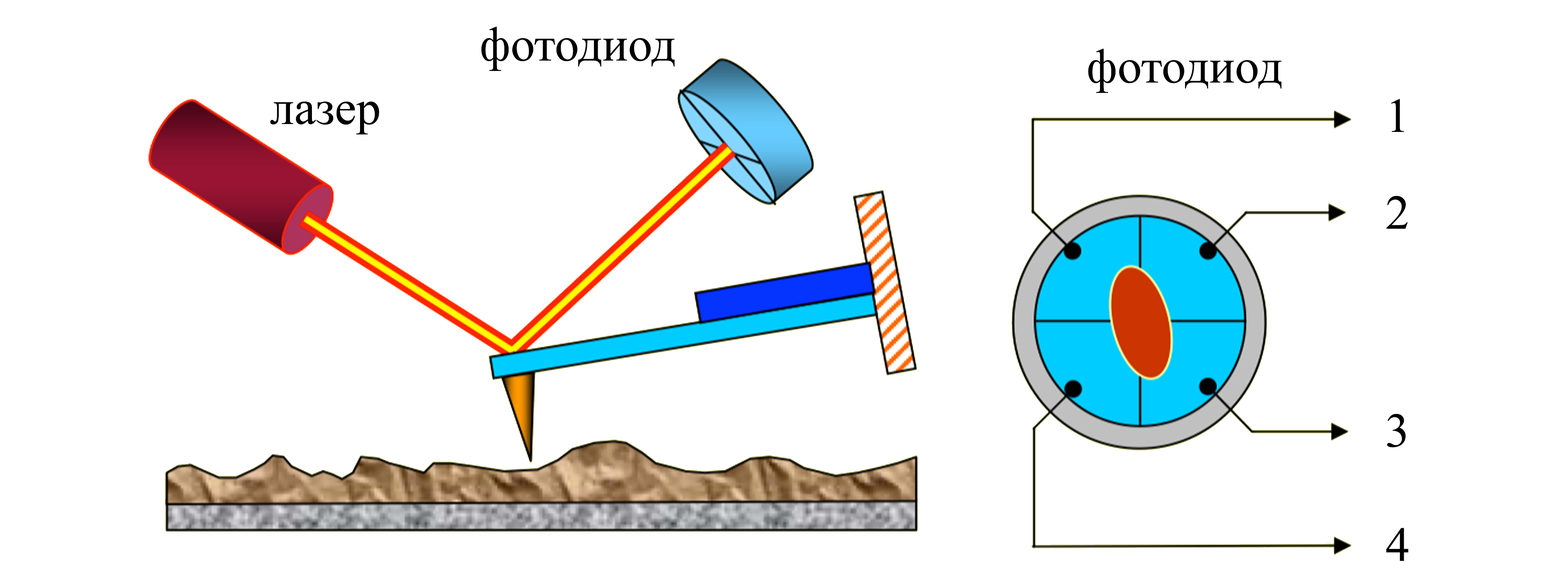
<style>
.page{position:relative;width:1568px;height:587px;background:#ffffff}
.page>*{position:absolute;margin:0}
.t1{font:48.4px "TimesNewRomanPSMT";color:#000000}
</style>
<div class="page">
<p class="t1" style="left:481px;top:27px;width:194px;height:44px">фотодиод</p>
<p class="t1" style="left:1088px;top:49px;width:194px;height:44px">фотодиод</p>
<p class="t1" style="left:270px;top:101px;width:109px;height:33px">лазер</p>
<p class="t1" style="left:1391px;top:99px;width:13px;height:33px">1</p>
<p class="t1" style="left:1386px;top:196px;width:22px;height:33px">2</p>
<p class="t1" style="left:1387px;top:414px;width:19px;height:34px">3</p>
</div>
